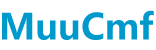
<style>
.page{position:relative;width:156px;height:50px;background:#ffffff}
.page>*{position:absolute;margin:0}
.t1{font:35.3px "MicrosoftYaHei-Bold";color:#0099cc}
</style>
<div class="page">
<p class="t1" style="left:2px;top:10px;width:152px;height:30px">MuuCmf</p>
</div>
